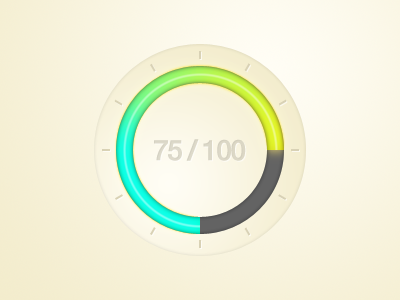
<style>
.page{position:relative;width:400px;height:300px}
.page>*{position:absolute;margin:0}
.t1{font:28px "HelveticaNeue-Medium";letter-spacing:-0.08em;color:#c8c4b3;font-weight:bold}
</style>
<div class="page">
<p class="t1" style="left:154px;top:139px;width:92px;height:22px;opacity:0.6">75 / 100</p>
</div>
